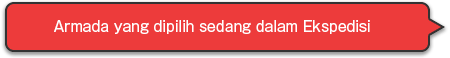
<style>
.page{position:relative;width:450px;height:58px;background:#ed3b3b}
.page>*{position:absolute;margin:0}
.t1{font:14px "GothicMB101Pro-Regular";color:#ffffff}
</style>
<div class="page">
<p class="t1" style="left:54px;top:20px;width:316px;height:14px">Armada yang dipilih sedang dalam Ekspedisi</p>
</div>
